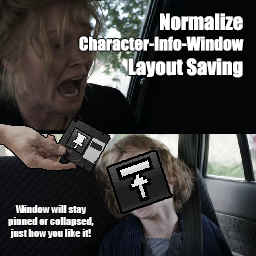
<style>
.page{position:relative;width:256px;height:256px}
.page>*{position:absolute;margin:0}
.t1{font:17.1px "Impact";color:#ffffff}
.t2{font:20.5px "Impact";color:#ffffff}
.t3{font:10.2px "Impact";color:#ffffff}
</style>
<div class="page">
<p class="t1" style="left:79px;top:13px;width:165px;height:65px;text-align:right"><span class="t2">Normalize </span>Character-Info-Window<br><span class="t2">Layout Saving</span></p>
<p class="t3" style="left:8px;top:205px;width:86px;height:33px;text-align:center">Window will stay <br>pinned or collapsed, <br>just how you like it!</p>
</div>
